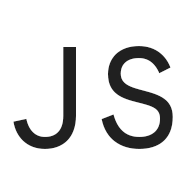
<style>
.page{position:relative;width:192px;height:192px;background:#ffffff}
.page>*{position:absolute;margin:0}
.t1{font:144.3px "Apercu-Mono";letter-spacing:0.001em;color:#202020}
</style>
<div class="page">
<p class="t1" style="left:13px;top:46px;width:160px;height:103px">JS</p>
</div>
